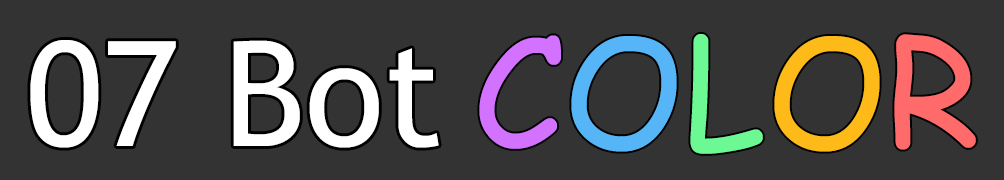
<style>
.page{position:relative;width:1004px;height:180px;background:#333333}
.page>*{position:absolute;margin:0}
.t1{font:145.8px "TrebuchetMS";color:#ffffff}
.t2{font:150px "ComicSansMS";color:#d272ff}
.t3{font:150px "ComicSansMS";color:#56b5f7}
.t4{font:150px "ComicSansMS";color:#6cf994}
.t5{font:150px "ComicSansMS";color:#fdba18}
.t6{font:150px "ComicSansMS";color:#ff6a6a}
</style>
<div class="page">
<p class="t1" style="left:30px;top:40px;width:409px;height:108px">07 Bot</p>
<p class="t2" style="left:479px;top:34px;width:497px;height:120px">C<span class="t3">O</span><span class="t4">L</span><span class="t5">O</span><span class="t6">R</span></p>
</div>
